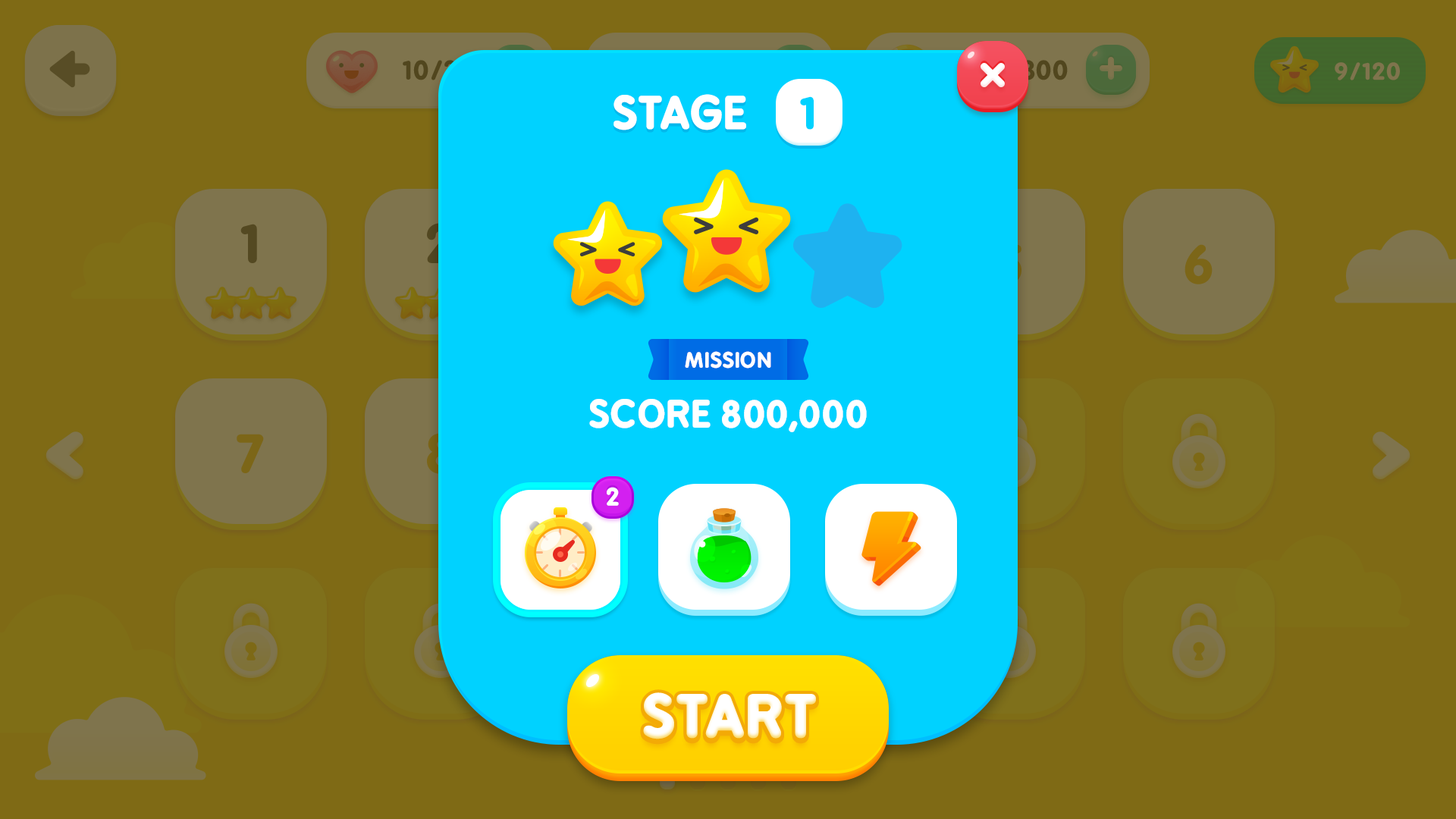
<style>
.page{position:relative;width:1456px;height:819px;background:#7f6a15}
.page>*{position:absolute;margin:0}
.t1{font:43.1px "BPreplay-Bold";color:#ffffff;text-transform:uppercase;scale:1.05 1}
.t2{font:43.1px "BPreplay-Bold";color:#00d2ff;text-transform:uppercase;scale:1.05 1}
.t3{font:20.2px "BPreplay-Bold";color:#ffffff;text-transform:uppercase;scale:1.05 1}
.t4{font:36px "BPreplay-Bold";color:#ffffff;text-transform:uppercase;scale:1.05 1}
.t5{font:23.8px "BPreplay-Bold";letter-spacing:-0.1em;color:#ffffff;scale:1.06 1}
.t6{font:54.8px "BPreplay-Bold";color:#ffffff;text-transform:uppercase;font-weight:bold;scale:1.05 1}
</style>
<div class="page">
<p class="t1" style="left:613px;top:94px;width:133px;height:36px">STAGE</p>
<p class="t2" style="left:800px;top:96px;width:14px;height:34px">1</p>
<p class="t3" style="left:685px;top:351px;width:86px;height:18px">Mission</p>
<p class="t4" style="left:589px;top:399px;width:278px;height:33px">Score 800,000</p>
<p class="t5" style="left:607px;top:487px;width:12px;height:19px">2</p>
<p class="t6" style="left:643px;top:692px;width:173px;height:47px">START</p>
</div>
